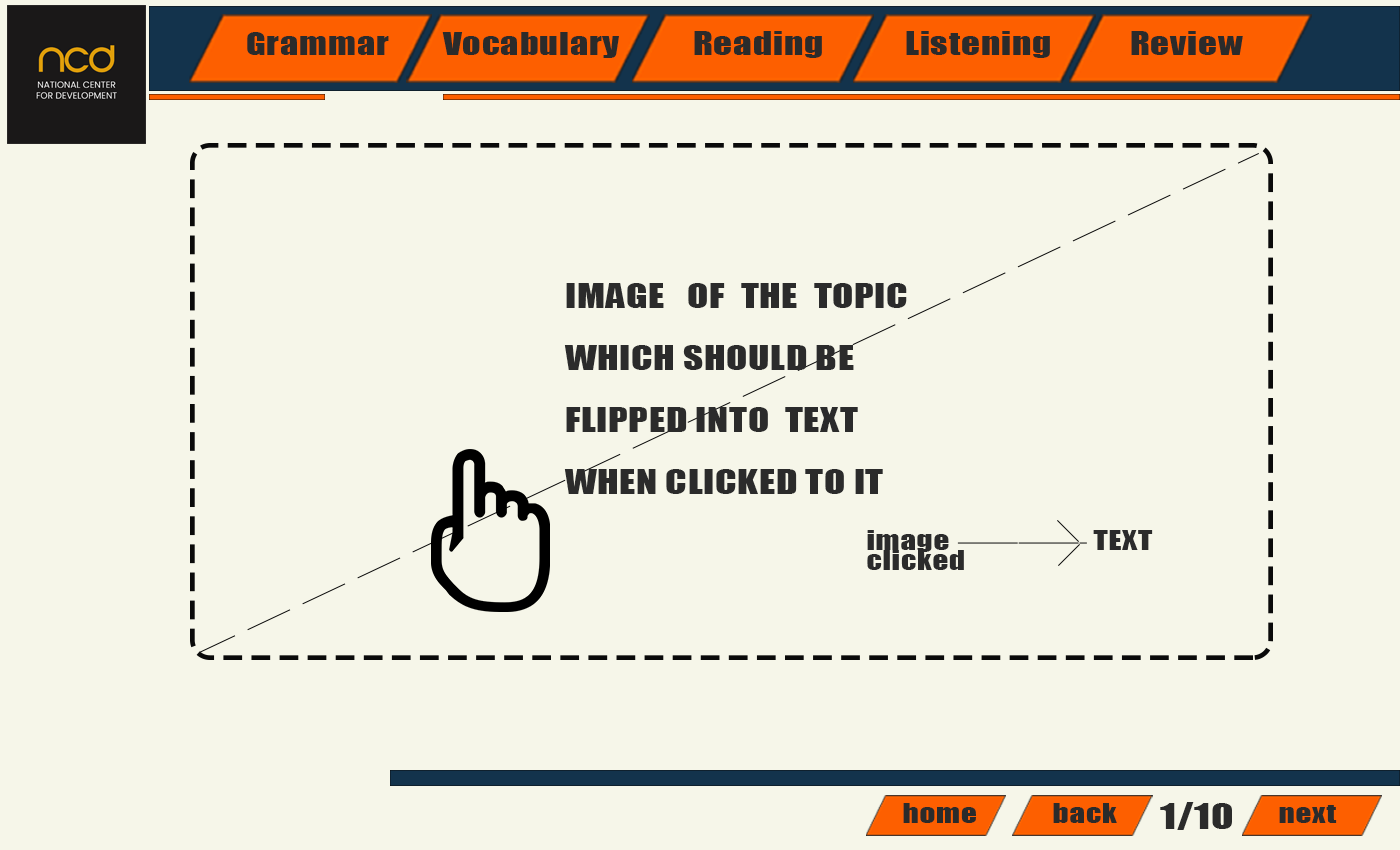
<style>
.page{position:relative;width:1400px;height:850px;background:#f6f6e9}
.page>*{position:absolute;margin:0}
.t1{font:29.2px "Impact";letter-spacing:0.02em;color:#2b2b2b;scale:1.25 1}
.t2{font:29.9px "Impact";letter-spacing:0.02em;color:#2b2b2b;scale:1.25 1}
.t3{font:31px/61.9px "Impact";letter-spacing:0.02em;color:#2b2b2b;scale:1.25 1}
.t4{font:25px "Impact";letter-spacing:0.02em;color:#2b2b2b;scale:1.25 1}
.t5{font:33.3px "Impact";letter-spacing:0.02em;color:#2b2b2b;scale:1.25 1}
</style>
<div class="page">
<p class="t1" style="left:247px;top:32px;width:142px;height:23px">Grammar</p>
<p class="t1" style="left:442px;top:32px;width:177px;height:26px">Vocabulary</p>
<p class="t2" style="left:694px;top:31px;width:128px;height:27px">Reading</p>
<p class="t2" style="left:906px;top:31px;width:144px;height:27px">Listening</p>
<p class="t2" style="left:1131px;top:31px;width:112px;height:24px">Review</p>
<p class="t3" style="left:564px;top:283px;width:343px;height:211px">IMAGE   OF  THE  TOPIC<br>WHICH SHOULD BE FLIPPED INTO  TEXT WHEN CLICKED TO IT</p>
<p class="t4" style="left:867px;top:530px;width:82px;height:22px">image</p>
<p class="t4" style="left:1093px;top:530px;width:60px;height:20px">TEXT</p>
<p class="t4" style="left:867px;top:550px;width:97px;height:20px">clicked</p>
<p class="t4" style="left:903px;top:803px;width:73px;height:20px">home</p>
<p class="t4" style="left:1053px;top:803px;width:64px;height:20px">back</p>
<p class="t5" style="left:1160px;top:802px;width:72px;height:28px">1/10</p>
<p class="t4" style="left:1279px;top:805px;width:58px;height:18px">next</p>
</div>
